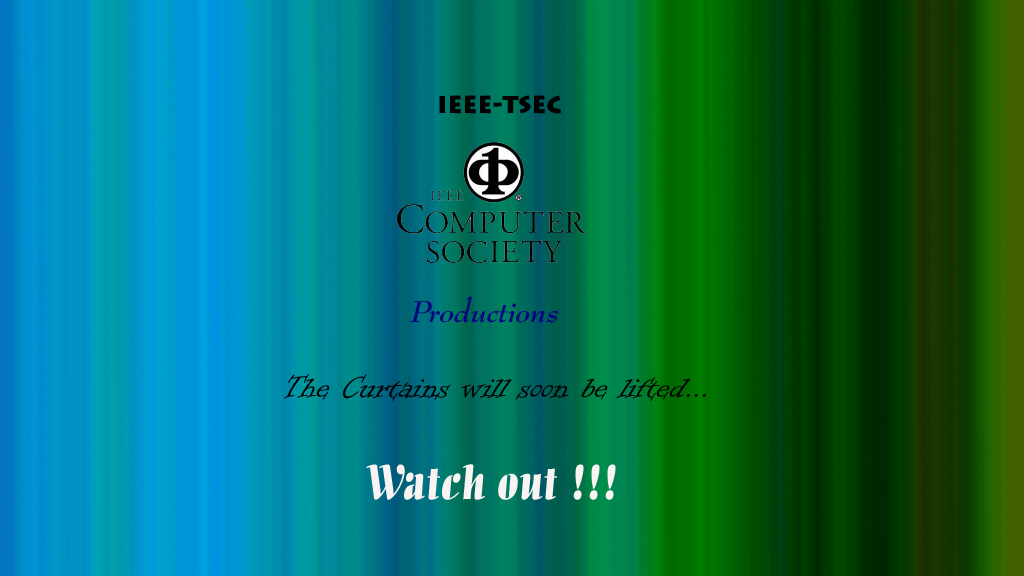
<style>
.page{position:relative;width:1024px;height:576px}
.page>*{position:absolute;margin:0}
.t1{font:30px "BernhardModernBT-BoldItalic";color:#04077f}
.t2{font:24px "InformalRoman-Regular";color:#000000}
.t3{font:24px "Lithograph-Bold";color:#000000}
.t4{font:36px "InformalRoman-Regular";color:#000000}
.t5{font:48px "AllegroBT-Regular";color:#f9f4f4}
</style>
<div class="page">
<p class="t1" style="left:409px;top:95px;width:152px;height:228px"><span class="t2">  </span><span class="t3">   IEEE-TSEC<br><br><br><br><br><br><br> </span>Productions</p>
<p class="t4" style="left:284px;top:374px;width:422px;height:126px"><span class="t2">                     <br><br>                      <br>                  <br><br>                 </span>The Curtains will soon be lifted...<br><br>                      <span class="t5">Watch out !!!</span></p>
</div>
